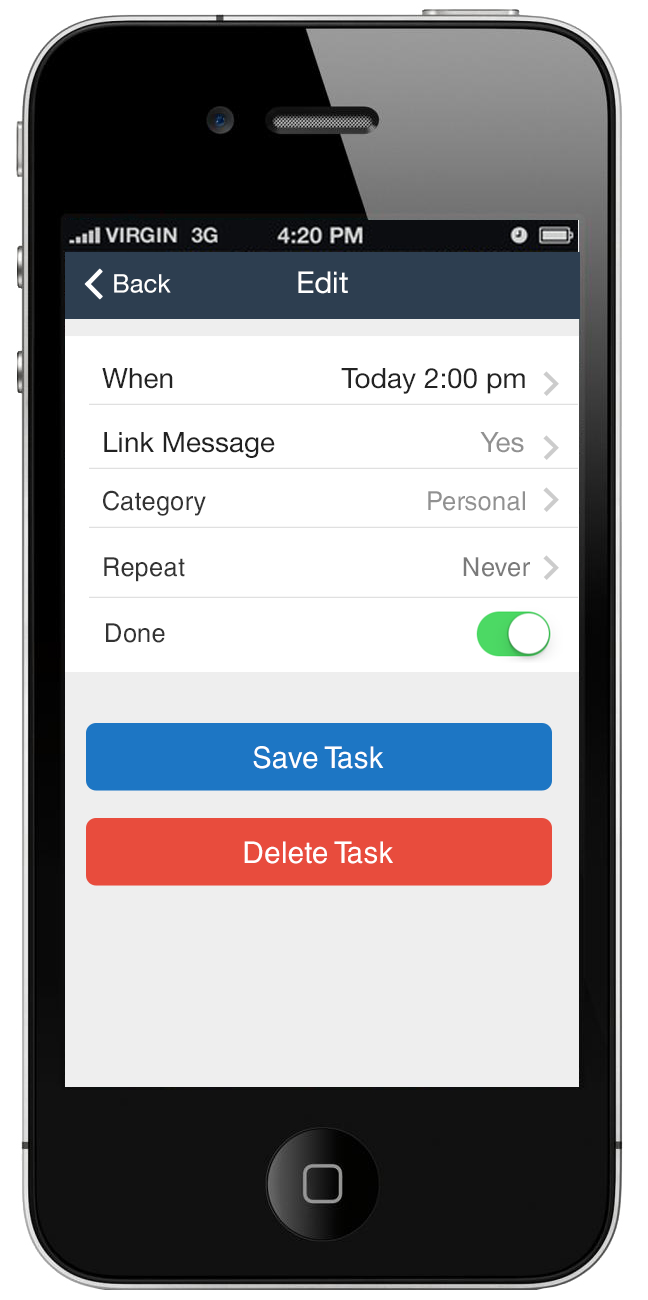
<style>
.page{position:relative;width:648px;height:1300px;background:#ffffff}
.page>*{position:absolute;margin:0}
.t1{font:25.5px "HelveticaNeue";color:#ffffff}
.t2{font:30px "HelveticaNeue";color:#ffffff}
.t3{font:28px "HelveticaNeue";color:#232323}
.t4{font:28px "HelveticaNeue";color:#212121}
.t5{font:28px "HelveticaNeue";color:#919191}
.t6{font:26px "HelveticaCyr-Upright";color:#333333}
.t7{font:26px "HelveticaCyr-Upright";color:#919191}
.t8{font:26px "HelveticaCyr-Upright";color:#7a7a7a}
.t9{font:30px "HelveticaCyr-Upright";color:#ffffff}
</style>
<div class="page">
<p class="t1" style="left:114px;top:274px;width:57px;height:19px">Back</p>
<p class="t2" style="left:298px;top:271px;width:50px;height:23px">Edit</p>
<p class="t3" style="left:102px;top:368px;width:423px;height:26px">When       Today 2:00 pm</p>
<p class="t4" style="left:104px;top:432px;width:420px;height:26px">Link Message            <span class="t5">Yes</span></p>
<p class="t6" style="left:103px;top:490px;width:422px;height:26px">Category           <span class="t7">Personal</span></p>
<p class="t6" style="left:104px;top:557px;width:426px;height:25px">Repeat        <span class="t8">Never</span></p>
<p class="t6" style="left:106px;top:623px;width:59px;height:20px">Done</p>
<p class="t9" style="left:253px;top:746px;width:131px;height:23px">Save Task</p>
<p class="t9" style="left:244px;top:841px;width:149px;height:23px">Delete Task</p>
</div>
